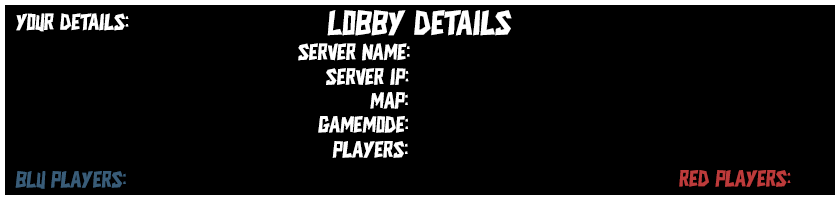
<style>
.page{position:relative;width:840px;height:200px;background:#000000}
.page>*{position:absolute;margin:0}
.t1{font:24px "CIKANDEI";color:#ffffff}
.t2{font:36px "CIKANDEI";color:#ffffff}
.t3{font:24px "CIKANDEI";color:#395c78}
.t4{font:24px "CIKANDEI";color:#bd3b3b}
</style>
<div class="page">
<p class="t1" style="left:16px;top:13px;width:113px;height:19px">Your Details:</p>
<p class="t2" style="left:327px;top:10px;width:185px;height:26px">Lobby Details</p>
<p class="t1" style="left:298px;top:43px;width:112px;height:18px">SERVER NAME:</p>
<p class="t1" style="left:326px;top:68px;width:83px;height:17px">SERVER IP:</p>
<p class="t1" style="left:370px;top:92px;width:38px;height:17px">Map:</p>
<p class="t1" style="left:318px;top:116px;width:90px;height:17px">Gamemode:</p>
<p class="t1" style="left:332px;top:141px;width:76px;height:17px">Players:</p>
<p class="t3" style="left:15px;top:171px;width:111px;height:18px">BLU Players:</p>
<p class="t4" style="left:679px;top:170px;width:112px;height:17px">RED Players:</p>
</div>
